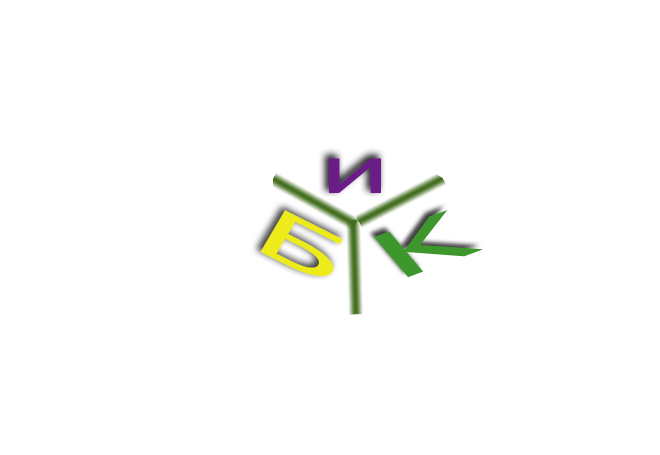
<style>
.page{position:relative;width:660px;height:455px;background:#ffffff}
.page>*{position:absolute;margin:0}
.t1{font:54.4px "Consolas";color:#6b1c88;scale:2.21 1}
.t2{font:75.4px "Consolas";color:#edeb19;scale:2.23 1}
.t3{font:82.2px "Consolas";color:#3e982d;scale:2.24 1}
</style>
<div class="page">
<p class="t1" style="left:328px;top:158px;width:53px;height:35px">И</p>
<p class="t2" style="left:260px;top:210px;width:83px;height:66px;rotate:27deg">Б</p>
<p class="t3" style="left:374px;top:210px;width:110px;height:68px;rotate:-20deg">К</p>
</div>
